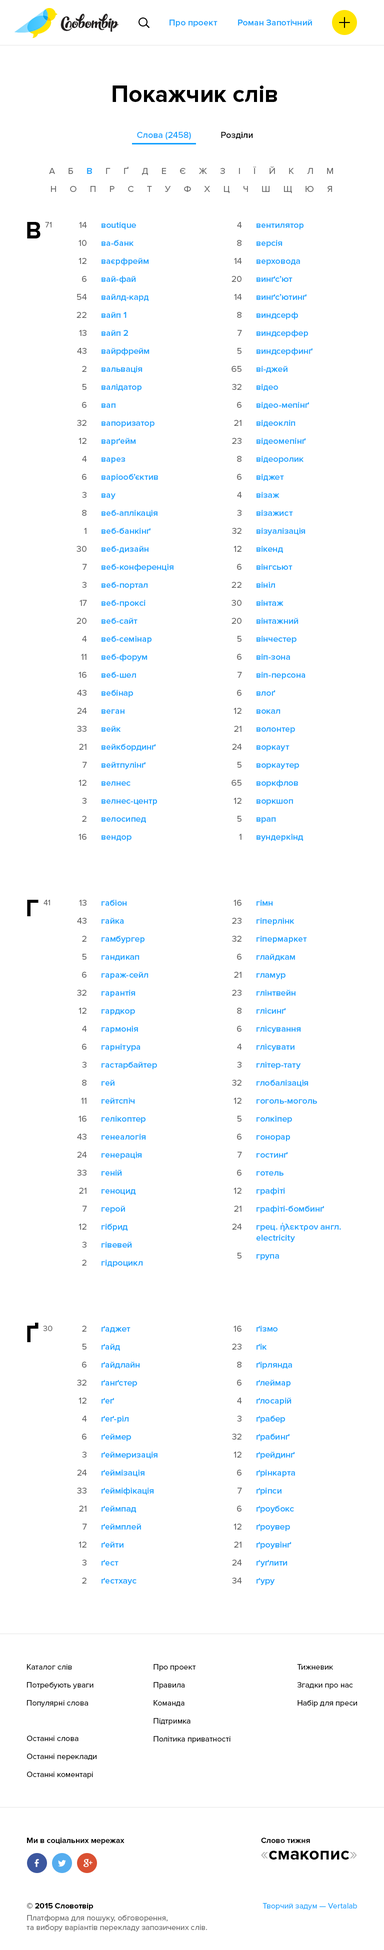
<style>
.page{position:relative;width:384px;height:1950px;background:#ffffff}
.page>*{position:absolute;margin:0}
.t1{font:9px "ProximaNova-Semibold";color:#17a2ff}
.t2{font:24px "ProximaNova-Bold";color:#000000}
.t3{font:9px "ProximaNova-Semibold";color:#000000}
.t4{font:9px/18px "ProximaNova-Regular";letter-spacing:0.6em;color:#666666}
.t5{font:9px/18px "ProximaNova-Semibold";letter-spacing:0.6em;color:#17a2ff}
.t6{font:8px "ProximaNova-Regular";color:#666666}
.t7{font:9px/18px "ProximaNova-Regular";color:#666666}
.t8{font:9px/18px "ProximaNova-Semibold";color:#17a2ff}
.t9{font:9px/11px "ProximaNova-Regular";color:#666666}
.t10{font:8px/18px "ProximaNova-Regular";color:#000000}
.t11{font:8px/18px "ProximaNova-Regular";color:#010101}
.t12{font:8px "ProximaNova-Bold";color:#010101}
.t13{font:18px "ProximaNova-Bold";color:#000000}
.t14{font:18px "ProximaNova-Regular";color:#b3b3b3}
.t15{font:8px/11px "ProximaNova-Bold";color:#000000}
.t16{font:8px/12px "ProximaNova-Regular";color:#666666}
.t17{font:8px "ProximaNova-Regular";color:#17a2ff}
</style>
<div class="page">
<p class="t1" style="left:170px;top:20px;width:48px;height:7px">Про проект</p>
<p class="t1" style="left:238px;top:20px;width:74px;height:6px">Роман Запотічний</p>
<p class="t2" style="left:112px;top:86px;width:165px;height:16px">Покажчик слів</p>
<p class="t1" style="left:137px;top:132px;width:54px;height:8px">Слова (2458)</p>
<p class="t3" style="left:221px;top:132px;width:32px;height:8px">Розділи</p>
<p class="t4" style="left:49px;top:166px;width:284px;height:28px;text-align:center">А Б <span class="t5">В</span> Г Ґ Д Е Є Ж З І Ї Й К Л М<br>Н О П Р С Т У Ф Х Ц Ч Ш Щ Ю Я</p>
<p class="t2" style="left:27px;top:222px;width:13px;height:16px">В</p>
<p class="t6" style="left:45px;top:222px;width:7px;height:6px">71</p>
<p class="t7" style="left:76px;top:222px;width:11px;height:618px;text-align:right">14<br>10<br>12<br>6<br>54<br>22<br>13<br>43<br>2<br>5<br>6<br>32<br>12<br>4<br>6<br>3<br>8<br>1<br>30<br>7<br>3<br>17<br>20<br>4<br>11<br>16<br>43<br>24<br>33<br>21<br>7<br>12<br>3<br>2<br>16</p>
<p class="t8" style="left:102px;top:222px;width:72px;height:620px">вoutique<br>ва-банк<br>ваєрфрейм<br>вай-фай<br>вайлд-кард<br>вайп 1<br>вайп 2<br>вайрфрейм<br>вальвація<br>валідатор<br>вап<br>вапоризатор<br>варґейм<br>варез<br>варіооб’єктив<br>вау<br>веб-аплікація<br>веб-банкінґ<br>веб-дизайн<br>веб-конференція<br>веб-портал<br>веб-проксі<br>веб-сайт<br>веб-семінар<br>веб-форум<br>веб-шел<br>вебінар<br>веган<br>вейк<br>вейкбординґ<br>вейтпулінґ<br>велнес<br>велнес-центр<br>велосипед<br>вендор</p>
<p class="t7" style="left:232px;top:222px;width:10px;height:618px;text-align:right">4<br>8<br>14<br>20<br>14<br>8<br>7<br>5<br>65<br>32<br>6<br>21<br>23<br>8<br>6<br>4<br>3<br>32<br>12<br>6<br>22<br>30<br>20<br>5<br>6<br>7<br>6<br>12<br>21<br>24<br>5<br>65<br>12<br>5<br>1</p>
<p class="t8" style="left:256px;top:224px;width:56px;height:618px">вентилятор<br>версія<br>верховода<br>винґс’ют<br>винґс’ютинґ<br>виндсерф<br>виндсерфер<br>виндсерфинґ<br>ві-джей<br>відео<br>відео-мепінґ<br>відеокліп<br>відеомепінґ<br>відеоролик<br>віджет<br>візаж<br>візажист<br>візуалізація<br>вікенд<br>вінгсьют<br>вініл<br>вінтаж<br>вінтажний<br>вінчестер<br>віп-зона<br>віп-персона<br>влоґ<br>вокал<br>волонтер<br>воркаут<br>воркаутер<br>воркфлов<br>воркшоп<br>врап<br>вундеркінд</p>
<p class="t2" style="left:27px;top:900px;width:11px;height:16px">Г</p>
<p class="t6" style="left:44px;top:900px;width:6px;height:6px">41</p>
<p class="t7" style="left:77px;top:900px;width:10px;height:366px;text-align:right">13<br>43<br>2<br>5<br>6<br>32<br>12<br>4<br>6<br>3<br>8<br>11<br>16<br>43<br>24<br>33<br>21<br>7<br>12<br>3<br>2</p>
<p class="t8" style="left:102px;top:900px;width:55px;height:368px">габіон<br>гайка<br>гамбургер<br>гандикап<br>гараж-сейл<br>гарантія<br>гардкор<br>гармонія<br>гарнітура<br>гастарбайтер<br>гей<br>гейтспіч<br>гелікоптер<br>генеалогія<br>генерація<br>геній<br>геноцид<br>герой<br>гібрид<br>гівевей<br>гідроцикл</p>
<p class="t7" style="left:232px;top:900px;width:10px;height:359px;text-align:right">16<br>23<br>32<br>6<br>21<br>23<br>8<br>6<br>4<br>3<br>32<br>12<br>5<br>6<br>7<br>6<br>12<br>21<br>24<br><br><span class="t9">5</span></p>
<p class="t8" style="left:256px;top:900px;width:85px;height:360px">гімн<br>гіперлінк<br>гіпермаркет<br>глайдкам<br>гламур<br>глінтвейн<br>глісинґ<br>глісування<br>глісувати<br>глітер-тату<br>глобалізація<br>гоголь-моголь<br>голкіпер<br>гонорар<br>гостинґ<br>готель<br>графіті<br>графіті-бомбинґ<br>грец. ήλεκτρον англ.<br><span class="t1">electricity<br></span>група</p>
<p class="t2" style="left:27px;top:1323px;width:11px;height:19px">Ґ</p>
<p class="t6" style="left:43px;top:1326px;width:9px;height:6px">30</p>
<p class="t7" style="left:77px;top:1326px;width:10px;height:258px;text-align:right">2<br>5<br>6<br>32<br>12<br>4<br>6<br>3<br>24<br>33<br>21<br>7<br>12<br>3<br>2</p>
<p class="t8" style="left:102px;top:1326px;width:56px;height:260px">ґаджет<br>ґайд<br>ґайдлайн<br>ґанґстер<br>ґеґ<br>ґеґ-ріл<br>ґеймер<br>ґеймеризація<br>ґеймізація<br>ґейміфікація<br>ґеймпад<br>ґеймплей<br>ґейти<br>ґест<br>ґестхаус</p>
<p class="t7" style="left:232px;top:1326px;width:10px;height:258px;text-align:right">16<br>23<br>8<br>6<br>4<br>3<br>32<br>12<br>6<br>7<br>6<br>12<br>21<br>24<br>34</p>
<p class="t8" style="left:256px;top:1326px;width:39px;height:260px">ґізмо<br>ґік<br>ґірлянда<br>ґлеймар<br>ґлосарій<br>ґрабер<br>ґрабинґ<br>ґрейдинґ<br>ґрінкарта<br>ґріпси<br>ґроубокс<br>ґроувер<br>ґроувінґ<br>ґуґлити<br>ґуру</p>
<p class="t10" style="left:27px;top:1664px;width:67px;height:44px">Каталог слів<br>Потребують уваги<br>Популярні слова</p>
<p class="t10" style="left:154px;top:1664px;width:76px;height:80px">Про проект<br>Правила<br>Команда<br>Підтримка<br>Політика приватності</p>
<p class="t11" style="left:297px;top:1664px;width:60px;height:44px">Тижневик<br>Згадки про нас<br>Набір для преси</p>
<p class="t10" style="left:27px;top:1736px;width:69px;height:43px">Останні слова<br>Останні переклади<br>Останні коментарі</p>
<p class="t12" style="left:27px;top:1838px;width:97px;height:7px">Ми в соціальних мережах</p>
<p class="t12" style="left:261px;top:1838px;width:49px;height:6px">Слово тижня</p>
<p class="t13" style="left:261px;top:1851px;width:96px;height:9px"><span class="t14">«</span>смакопис<span class="t14">»</span></p>
<p class="t6" style="left:26px;top:1904px;width:181px;height:28px"><span class="t15">© 2015 Словотвір<br></span><span class="t16">Платформа для пошуку, обговорення,<br></span>та вибору варіантів перекладу запозичених слів.</p>
<p class="t17" style="left:262px;top:1904px;width:95px;height:6px">Творчий задум — Vertalab</p>
</div>
